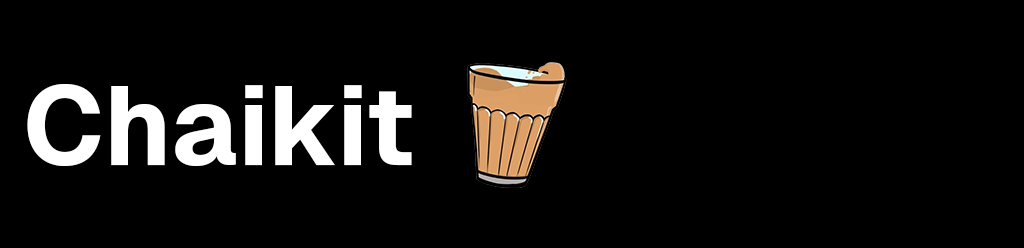
<style>
.page{position:relative;width:1024px;height:248px;background:#000000}
.page>*{position:absolute;margin:0}
.t1{font:111px "Geist-Bold";color:#ffffff}
</style>
<div class="page">
<p class="t1" style="left:27px;top:84px;width:385px;height:82px">Chaikit</p>
</div>
